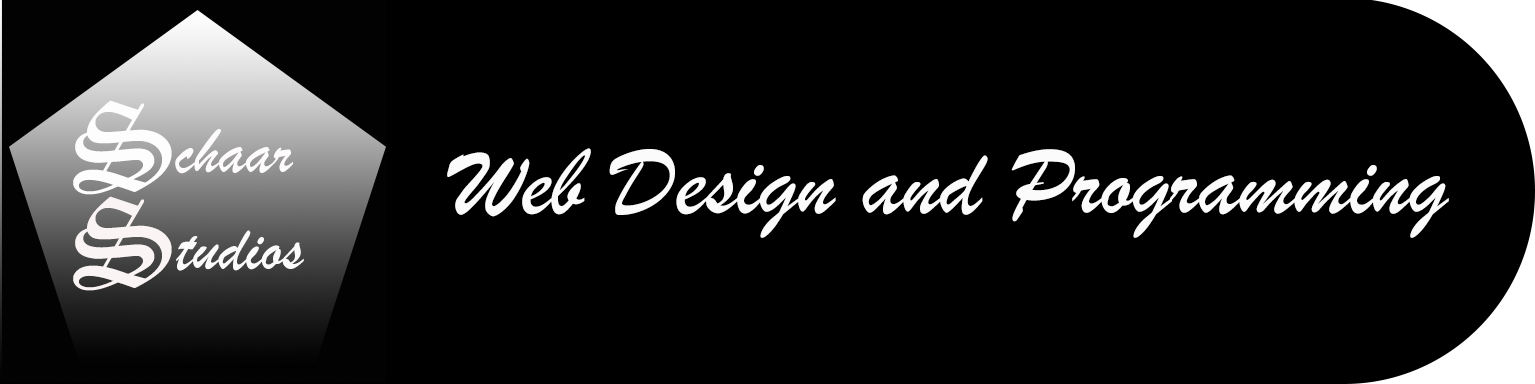
<style>
.page{position:relative;width:1535px;height:384px;background:#000000}
.page>*{position:absolute;margin:0}
.t1{font:125px "OldEnglishTextMT";color:#fdfdfd}
.t2{font:66.7px "BrushScriptMT";color:#fdfbfb}
.t3{font:100px "BrushScriptMT";color:#fbfbfb}
.t4{font:125px "OldEnglishTextMT";color:#fbf4f4}
.t5{font:66.7px "BrushScriptMT";color:#fbfbfb}
</style>
<div class="page">
<p class="t1" style="left:73px;top:100px;width:99px;height:95px">S</p>
<p class="t2" style="left:175px;top:129px;width:118px;height:45px">chaar</p>
<p class="t3" style="left:447px;top:148px;width:1002px;height:90px">Web Design and Programming</p>
<p class="t4" style="left:73px;top:196px;width:99px;height:95px">S</p>
<p class="t5" style="left:176px;top:230px;width:128px;height:41px">tudios</p>
</div>
